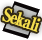
<style>
.page{position:relative;width:42px;height:40px;background:#ffffff}
.page>*{position:absolute;margin:0}
.t1{font:17.6px "RyuminPro-ExBold";letter-spacing:-0.08em;color:#f5de4f;font-weight:bold;scale:0.8 1}
</style>
<div class="page">
<p class="t1" style="left:2px;top:8px;width:39px;height:24px;rotate:19deg">Sekali</p>
</div>
